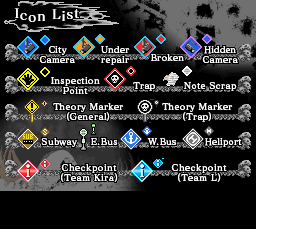
<style>
.page{position:relative;width:287px;height:248px;background:#000000}
.page>*{position:absolute;margin:0}
.t1{font:9px/10px "MatisseVPro-DB";letter-spacing:0.025em;color:#ffffff}
.t2{font:9px "MatisseVPro-DB";letter-spacing:0.025em;color:#ffffff}
.t3{font:9px/10px "MatisseVPro-DB";color:#ffffff}
.t4{font:9px "MatisseVPro-DB";color:#ffffff}
.t5{font:9px/10px "MatisseVPro-DB";letter-spacing:0.05em;color:#ffffff}
</style>
<div class="page">
<p class="t1" style="left:39px;top:46px;width:36px;height:17px;text-align:center">City<br>Camera</p>
<p class="t1" style="left:101px;top:46px;width:29px;height:19px;text-align:center">Under<br>repair</p>
<p class="t2" style="left:151px;top:54px;width:33px;height:7px">Broken</p>
<p class="t3" style="left:202px;top:46px;width:36px;height:17px;text-align:center">Hidden<br><span class="t1">Camera</span></p>
<p class="t1" style="left:51px;top:77px;width:49px;height:17px;text-align:center">Inspection<br>Point</p>
<p class="t2" style="left:133px;top:82px;width:22px;height:9px">Trap</p>
<p class="t2" style="left:184px;top:82px;width:53px;height:9px">Note Scrap</p>
<p class="t1" style="left:53px;top:103px;width:71px;height:18px;text-align:center">Theory Marker<br>(General)</p>
<p class="t1" style="left:162px;top:103px;width:71px;height:19px;text-align:center">Theory Marker<br>(Trap)</p>
<p class="t2" style="left:41px;top:138px;width:36px;height:9px">Subway</p>
<p class="t2" style="left:91px;top:138px;width:27px;height:7px">E.Bus</p>
<p class="t4" style="left:147px;top:138px;width:30px;height:7px">W.B<span class="t2">us</span></p>
<p class="t4" style="left:205px;top:138px;width:37px;height:9px">Heliport</p>
<p class="t5" style="left:61px;top:164px;width:57px;height:18px;text-align:center">Checkpoint<br>(Team Kira)</p>
<p class="t5" style="left:171px;top:164px;width:56px;height:18px;text-align:center">Checkpoint<br>(Team L)</p>
</div>
